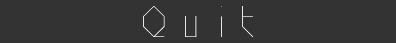
<style>
.page{position:relative;width:396px;height:43px;background:#333333}
.page>*{position:absolute;margin:0}
.t1{font:43.4px "Stick-Light"}
</style>
<div class="page">
<p class="t1" style="left:143px;top:6px;width:111px;height:31px">Quit</p>
</div>
